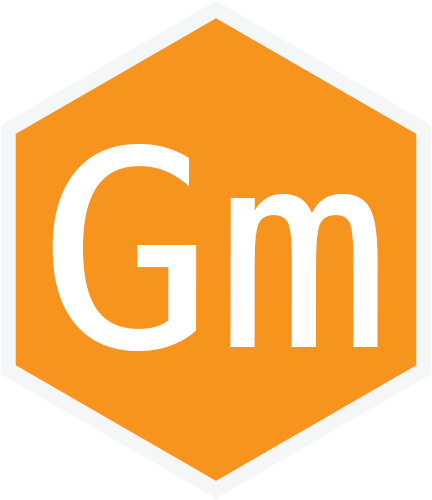
<style>
.page{position:relative;width:432px;height:500px;background:#f7941e}
.page>*{position:absolute;margin:0}
.t1{font:272.9px "Menlo-Regular";color:#ffffff;scale:1.07 1}
</style>
<div class="page">
<p class="t1" style="left:52px;top:144px;width:326px;height:207px">Gm</p>
</div>
